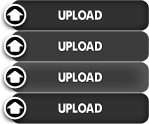
<style>
.page{position:relative;width:149px;height:124px}
.page>*{position:absolute;margin:0}
.t1{font:12px "a-bug's-life---debugged-Regular";letter-spacing:0.025em;color:#ffffff;text-transform:uppercase}
</style>
<div class="page">
<p class="t1" style="left:58px;top:10px;width:44px;height:10px">Upload</p>
<p class="t1" style="left:58px;top:41px;width:44px;height:10px">upload</p>
<p class="t1" style="left:58px;top:72px;width:44px;height:10px">upload</p>
<p class="t1" style="left:58px;top:103px;width:44px;height:10px">upload</p>
</div>
